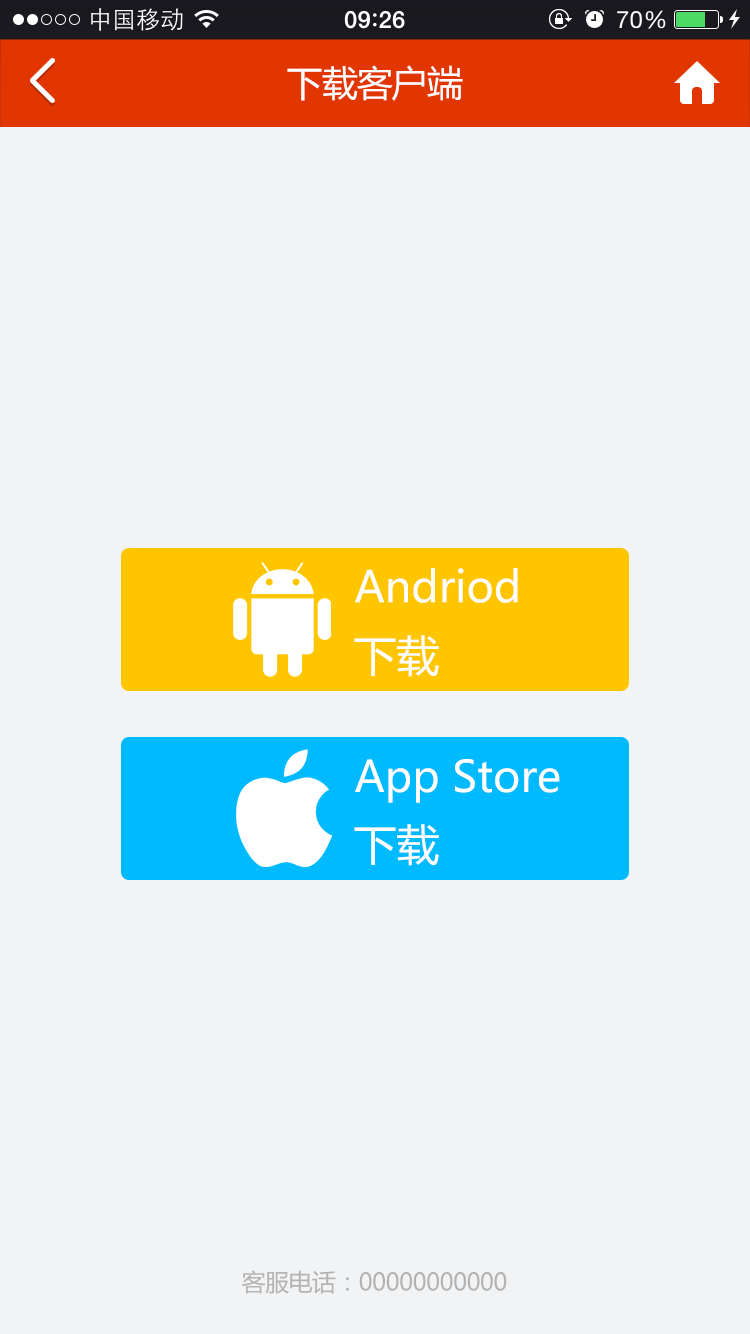
<style>
.page{position:relative;width:750px;height:1334px;background:#f2f3f5}
.page>*{position:absolute;margin:0}
.t1{font:36px "MicrosoftYaHei";letter-spacing:-0.025em;color:#ffffff}
.t2{font:42.9px "MicrosoftYaHei";color:#ffffff}
.t3{font:24px "MicrosoftYaHei";letter-spacing:-0.025em;color:#b3b3b3}
</style>
<div class="page">
<p class="t1" style="left:287px;top:65px;width:176px;height:36px">下载客户端</p>
<p class="t2" style="left:355px;top:568px;width:163px;height:35px">Andriod</p>
<p class="t2" style="left:354px;top:635px;width:85px;height:42px">下载</p>
<p class="t2" style="left:355px;top:759px;width:205px;height:44px">App Store</p>
<p class="t2" style="left:354px;top:824px;width:85px;height:42px">下载</p>
<p class="t3" style="left:241px;top:1270px;width:266px;height:24px">客服电话：00000000000</p>
</div>
